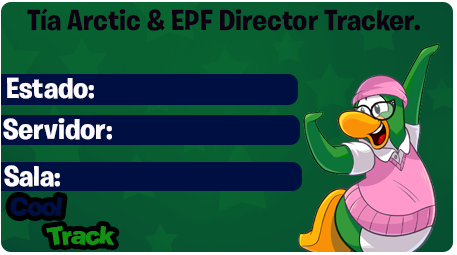
<style>
.page{position:relative;width:457px;height:255px}
.page>*{position:absolute;margin:0}
.t1{font:29px "BurbankBigRegular-Bold";color:#0c0012}
.t2{font:29px "BurbankBigRegular-Bold";color:#fdfafe}
</style>
<div class="page">
<p class="t1" style="left:27px;top:8px;width:393px;height:23px">Tía Arctic &amp; EPF Director Tracker.</p>
<p class="t2" style="left:7px;top:77px;width:87px;height:22px">Estado:</p>
<p class="t2" style="left:3px;top:118px;width:109px;height:22px">Servidor:</p>
<p class="t2" style="left:4px;top:165px;width:56px;height:22px">Sala:</p>
</div>
